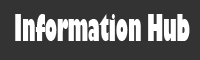
<style>
.page{position:relative;width:200px;height:60px;background:#333333}
.page>*{position:absolute;margin:0}
.t1{font:35.7px "GillSans-UltraBold";color:#ffffff;scale:0.47 1}
</style>
<div class="page">
<p class="t1" style="left:15px;top:14px;width:175px;height:27px">Information Hub</p>
</div>
